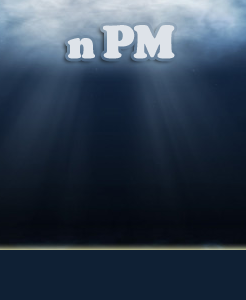
<style>
.page{position:relative;width:246px;height:300px}
.page>*{position:absolute;margin:0}
.t1{font:44px "CooperBlackStd";letter-spacing:-0.05em;color:#dee3e9;font-weight:bold}
.t2{font:38.5px "CooperBlackStd";letter-spacing:-0.05em;color:#dee3e9;font-weight:bold}
</style>
<div class="page">
<p class="t1" style="left:103px;top:25px;width:72px;height:34px">PM</p>
<p class="t2" style="left:67px;top:38px;width:28px;height:21px">n</p>
</div>
